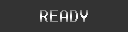
<style>
.page{position:relative;width:128px;height:32px;background:#333333}
.page>*{position:absolute;margin:0}
.t1{font:15.5px "Terminal";scale:1.16 1}
</style>
<div class="page">
<p class="t1" style="left:40px;top:10px;width:48px;height:12px">READY</p>
</div>
